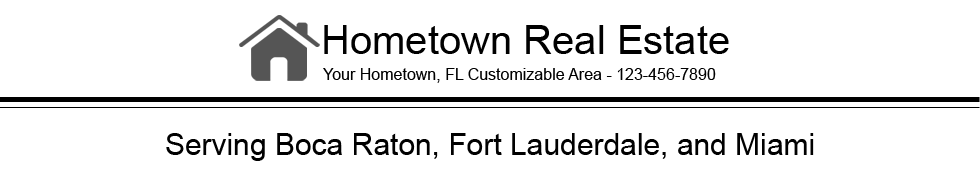
<style>
.page{position:relative;width:980px;height:169px;background:#ffffff}
.page>*{position:absolute;margin:0}
.t1{font:40px "ArialMT";color:#000000}
.t2{font:16px "ArialMT";color:#000000}
.t3{font:30px "ArialMT";color:#000000}
</style>
<div class="page">
<p class="t1" style="left:324px;top:25px;width:405px;height:29px">Hometown Real Estate</p>
<p class="t2" style="left:323px;top:68px;width:393px;height:15px">Your Hometown, FL Customizable Area - 123-456-7890</p>
<p class="t3" style="left:166px;top:133px;width:648px;height:28px">Serving Boca Raton, Fort Lauderdale, and Miami</p>
</div>
